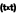
<style>
.page{position:relative;width:16px;height:16px;background:#ffffff}
.page>*{position:absolute;margin:0}
.t1{font:9.6px "HelveticaNeueLTPro-Hv";color:#000000}
.t2{font:8.9px "HelveticaNeueLTPro-Hv";color:#000000}
.t3{font:6.7px "HelveticaNeueLTPro-Hv";color:#000000}
.t4{font:9.6px "HelveticaNeueLTPro-Hv";letter-spacing:-0.08em;color:#000000}
</style>
<div class="page">
<p class="t1" style="left:0px;top:3px;width:16px;height:10px">(<span class="t2">t</span><span class="t3">x</span><span class="t2">t</span><span class="t4">)</span></p>
</div>
